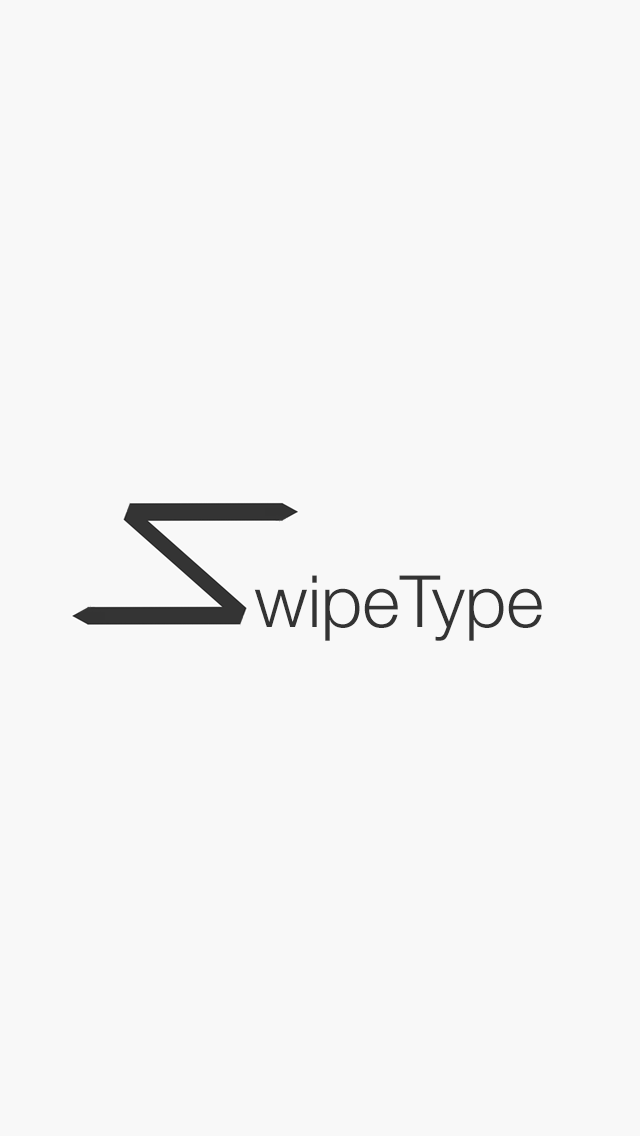
<style>
.page{position:relative;width:640px;height:1136px;background:#f8f8f8}
.page>*{position:absolute;margin:0}
.t1{font:72px "HelveticaNeue-Light";color:#333333}
</style>
<div class="page">
<p class="t1" style="left:254px;top:575px;width:288px;height:66px">wipeType</p>
</div>
